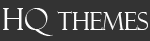
<style>
.page{position:relative;width:150px;height:41px;background:#333333}
.page>*{position:absolute;margin:0}
.t1{font:24px "FelixTitlingMT";color:#fdfdfd}
.t2{font:30px "FelixTitlingMT";color:#fdfdfd}
</style>
<div class="page">
<p class="t1" style="left:3px;top:8px;width:145px;height:28px"><span class="t2">HQ </span>THEMES</p>
</div>
